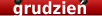
<style>
.page{position:relative;width:102px;height:16px}
.page>*{position:absolute;margin:0}
.t1{font:16.7px "DejaVuSansCondensed-Bold";color:#ffffff}
</style>
<div class="page">
<p class="t1" style="left:13px;top:0px;width:73px;height:18px">grudzień</p>
</div>
